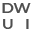
<style>
.page{position:relative;width:32px;height:32px;background:#ffffff}
.page>*{position:absolute;margin:0}
.t1{font:15.4px "Montserrat-SemiBold";letter-spacing:0.03em;color:#4f4f4f}
</style>
<div class="page">
<p class="t1" style="left:2px;top:3px;width:12px;height:10px">D</p>
<p class="t1" style="left:13px;top:3px;width:18px;height:10px">W</p>
<p class="t1" style="left:3px;top:19px;width:10px;height:10px">U</p>
<p class="t1" style="left:26px;top:19px;width:3px;height:10px">I</p>
</div>
